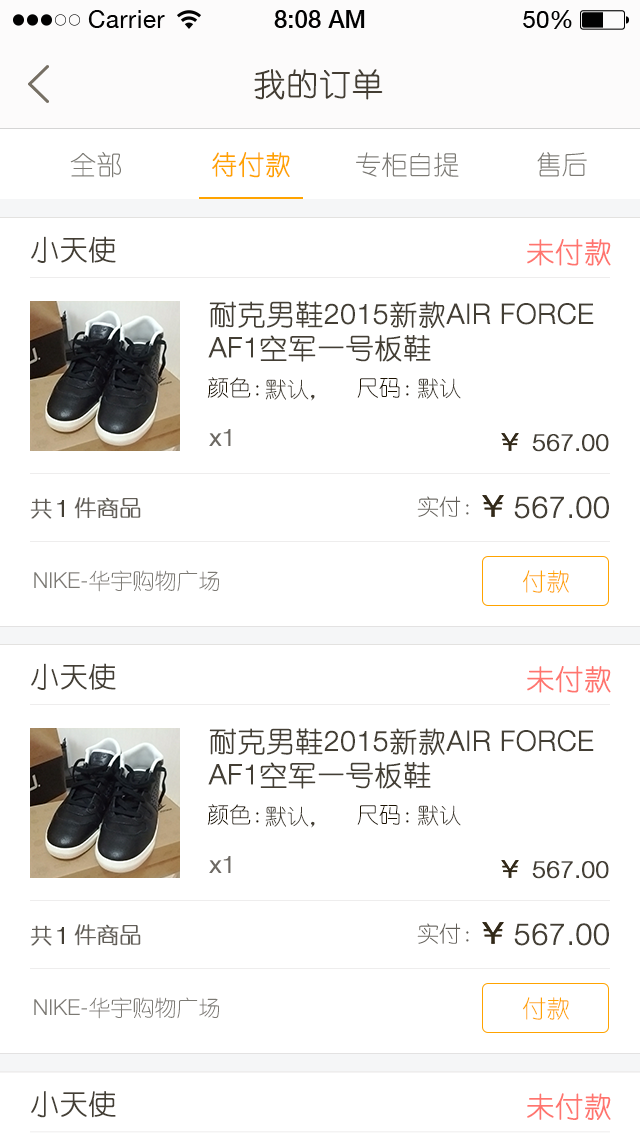
<style>
.page{position:relative;width:640px;height:1136px;background:#ffffff}
.page>*{position:absolute;margin:0}
.t1{font:32px "YouYuan";color:#433d33;text-transform:uppercase;font-weight:bold}
.t2{font:26.4px "YouYuan";color:#7b7973;text-transform:uppercase}
.t3{font:26.4px "YouYuan";color:#ffa300;text-transform:uppercase;font-weight:bold}
.t4{font:28px "YouYuan";color:#433e34;text-transform:uppercase;font-weight:bold}
.t5{font:28px "YouYuan";color:#ff5f57;text-transform:uppercase;font-weight:bold}
.t6{font:28px "HelveticaNeueLTPro-Lt";color:#433e34;text-transform:uppercase;font-weight:bold}
.t7{font:22px "YouYuan";color:#1b1100;text-transform:uppercase}
.t8{font:22px "YouYuan";color:#433e34;text-transform:uppercase}
.t9{font:24px "HelveticaNeueLTPro-Lt";color:#6d6963;font-weight:bold}
.t10{font:24px "HelveticaNeueLTPro-Lt";color:#433e34;text-transform:uppercase;font-weight:bold}
.t11{font:22px "YouYuan";color:#625e58;text-transform:uppercase;font-weight:bold}
.t12{font:22px "YouYuan";color:#625e58;text-transform:uppercase}
.t13{font:30px "HelveticaNeueLTPro-Lt";color:#433e34;text-transform:uppercase;font-weight:bold}
.t14{font:22px "YouYuan";color:#7b7973;text-transform:uppercase}
.t15{font:22px "HelveticaNeueLTPro-Lt";color:#7b7973;text-transform:uppercase}
.t16{font:24px "YouYuan";color:#ffa300;text-transform:uppercase}
</style>
<div class="page">
<p class="t1" style="left:254px;top:69px;width:129px;height:31px">我的订单</p>
<p class="t2" style="left:70px;top:151px;width:51px;height:27px">全部</p>
<p class="t3" style="left:212px;top:152px;width:78px;height:26px">待付款</p>
<p class="t2" style="left:356px;top:152px;width:103px;height:25px">专柜自提</p>
<p class="t2" style="left:537px;top:152px;width:50px;height:25px">售后</p>
<p class="t4" style="left:31px;top:236px;width:85px;height:27px">小天使</p>
<p class="t5" style="left:527px;top:239px;width:84px;height:27px;opacity:0.9">未付款</p>
<p class="t6" style="left:208px;top:301px;width:386px;height:61px"><span class="t4">耐克男鞋</span>2015<span class="t4">新款</span>air force AF1<span class="t4">空军一号板鞋</span></p>
<p class="t7" style="left:207px;top:377px;width:52px;height:21px">颜色：</p>
<p class="t8" style="left:265px;top:379px;width:50px;height:22px">默认，</p>
<p class="t7" style="left:357px;top:378px;width:52px;height:20px">尺码：</p>
<p class="t8" style="left:418px;top:378px;width:43px;height:21px">默认</p>
<p class="t9" style="left:209px;top:429px;width:22px;height:17px">x1</p>
<p class="t10" style="left:532px;top:434px;width:77px;height:18px">567.00</p>
<p class="t11" style="left:74px;top:497px;width:67px;height:22px">件商品</p>
<p class="t12" style="left:417px;top:496px;width:52px;height:21px">实付：</p>
<p class="t13" style="left:514px;top:496px;width:95px;height:23px">567.00</p>
<p class="t11" style="left:30px;top:498px;width:22px;height:21px">共</p>
<p class="t10" style="left:57px;top:500px;width:7px;height:17px">1</p>
<p class="t14" style="left:34px;top:570px;width:185px;height:22px"><span class="t15">NIKE-</span>华宇购物广场</p>
<p class="t16" style="left:523px;top:570px;width:46px;height:23px">付款</p>
<p class="t4" style="left:31px;top:663px;width:85px;height:27px">小天使</p>
<p class="t5" style="left:527px;top:666px;width:84px;height:27px;opacity:0.9">未付款</p>
<p class="t6" style="left:208px;top:728px;width:386px;height:61px"><span class="t4">耐克男鞋</span>2015<span class="t4">新款</span>air force AF1<span class="t4">空军一号板鞋</span></p>
<p class="t7" style="left:207px;top:804px;width:52px;height:21px">颜色：</p>
<p class="t8" style="left:265px;top:806px;width:50px;height:22px">默认，</p>
<p class="t7" style="left:357px;top:805px;width:52px;height:20px">尺码：</p>
<p class="t8" style="left:418px;top:805px;width:43px;height:21px">默认</p>
<p class="t9" style="left:209px;top:856px;width:22px;height:17px">x1</p>
<p class="t10" style="left:532px;top:861px;width:77px;height:18px">567.00</p>
<p class="t11" style="left:30px;top:925px;width:22px;height:21px">共</p>
<p class="t10" style="left:57px;top:927px;width:7px;height:17px">1</p>
<p class="t11" style="left:74px;top:924px;width:67px;height:22px">件商品</p>
<p class="t12" style="left:417px;top:923px;width:52px;height:21px">实付：</p>
<p class="t13" style="left:514px;top:923px;width:95px;height:23px">567.00</p>
<p class="t14" style="left:34px;top:997px;width:185px;height:22px"><span class="t15">NIKE-</span>华宇购物广场</p>
<p class="t16" style="left:523px;top:997px;width:46px;height:23px">付款</p>
<p class="t4" style="left:31px;top:1091px;width:85px;height:27px">小天使</p>
<p class="t5" style="left:527px;top:1093px;width:84px;height:27px;opacity:0.9">未付款</p>
</div>
